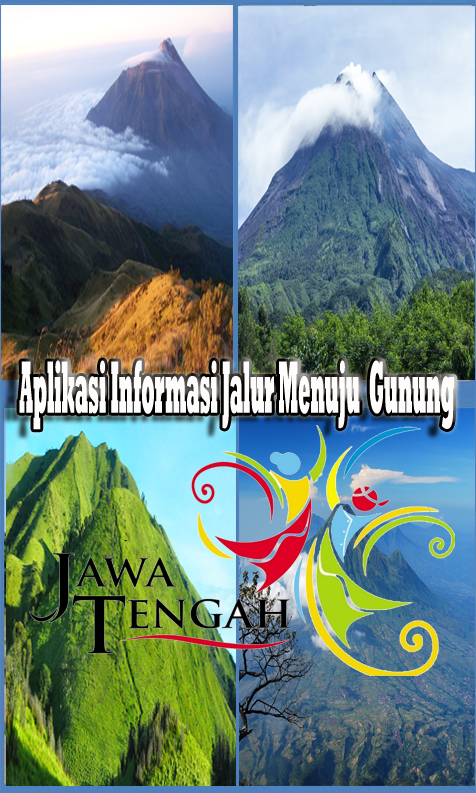
<style>
.page{position:relative;width:476px;height:793px}
.page>*{position:absolute;margin:0}
.t1{font:75.1px "Rockwell-ExtraBold";color:#fffdfc;scale:0.24 1}
</style>
<div class="page">
<p class="t1" style="left:19px;top:360px;width:436px;height:70px">Aplikasi Informasi Jalur Menuju  Gunung</p>
</div>
